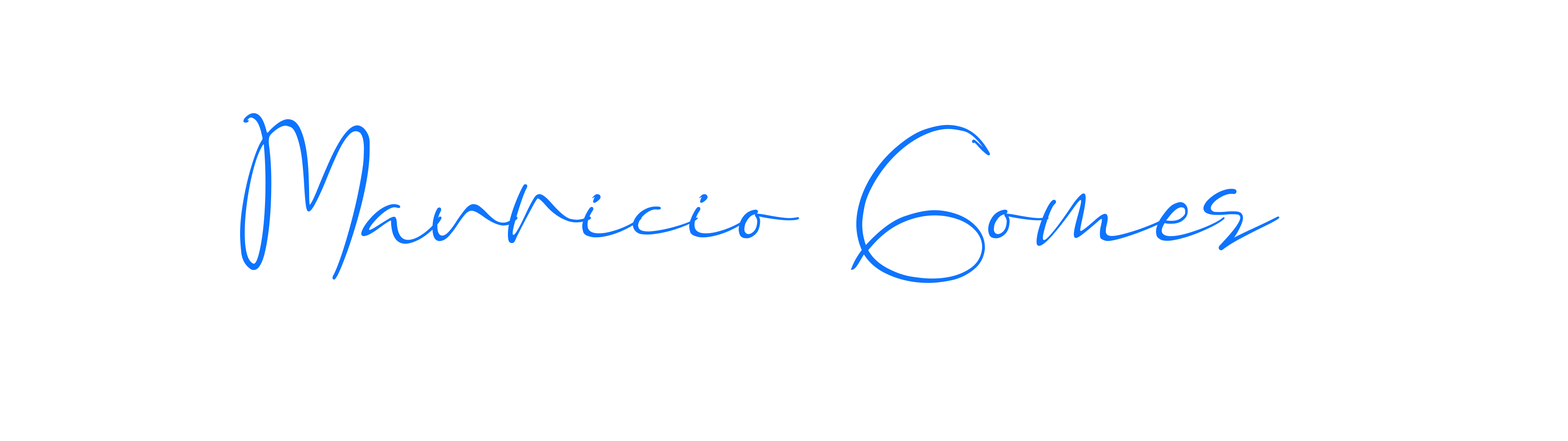
<style>
.page{position:relative;width:1568px;height:441px;background:#ffffff}
.page>*{position:absolute;margin:0}
.t1{font:185.8px "Assinatura";letter-spacing:-0.025em;color:#0e74ff}
</style>
<div class="page">
<p class="t1" style="left:240px;top:113px;width:1039px;height:170px">Mauricio Gomes</p>
</div>
